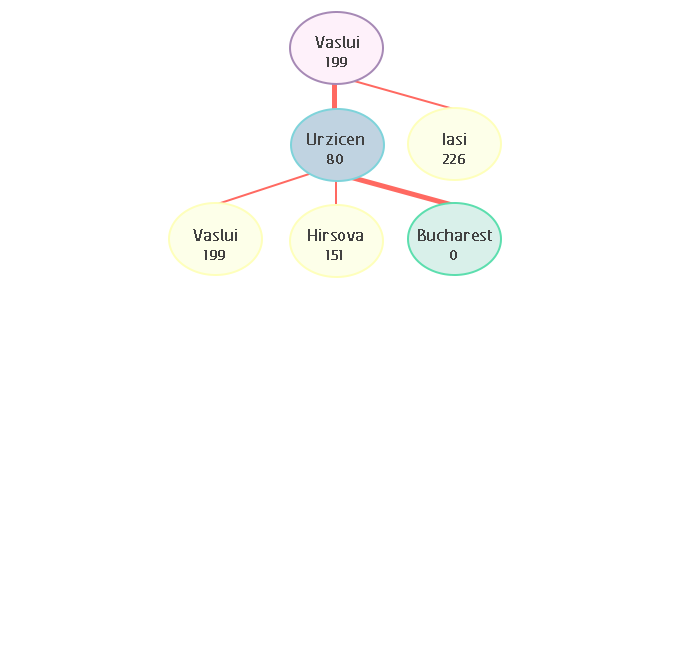
<style>
.page{position:relative;width:674px;height:660px;background:#ffffff}
.page>*{position:absolute;margin:0}
.t1{font:20.8px "FCActiveRegular";color:#424242;font-weight:bold}
.t2{font:16.7px "FCActiveRegular";color:#424141;font-weight:bold}
</style>
<div class="page">
<p class="t1" style="left:315px;top:36px;width:44px;height:12px">Vaslui</p>
<p class="t2" style="left:326px;top:57px;width:21px;height:10px">199</p>
<p class="t1" style="left:307px;top:133px;width:57px;height:12px">Urzicen</p>
<p class="t1" style="left:443px;top:133px;width:23px;height:12px">Iasi</p>
<p class="t2" style="left:327px;top:154px;width:16px;height:10px">80</p>
<p class="t2" style="left:443px;top:154px;width:22px;height:10px">226</p>
<p class="t1" style="left:193px;top:229px;width:44px;height:12px">Vaslui</p>
<p class="t1" style="left:308px;top:229px;width:55px;height:12px">Hirsova</p>
<p class="t1" style="left:418px;top:229px;width:74px;height:12px">Bucharest</p>
<p class="t2" style="left:204px;top:250px;width:21px;height:10px">199</p>
<p class="t2" style="left:326px;top:250px;width:16px;height:10px">151</p>
<p class="t2" style="left:450px;top:250px;width:7px;height:10px">0</p>
</div>
